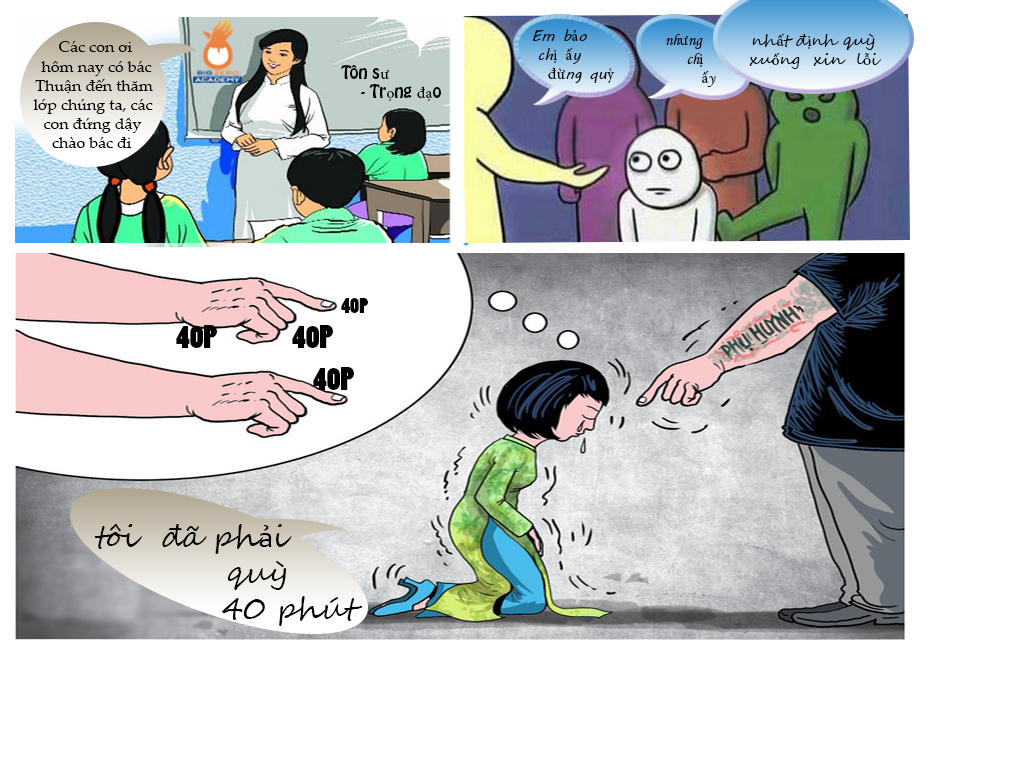
<style>
.page{position:relative;width:1024px;height:768px;background:#ffffff}
.page>*{position:absolute;margin:0}
.t1{font:16px "MVBoli";color:#000000}
.t2{font:16px "MinionPro-Regular";color:#000000}
.t3{font:16px "PalatinoLinotype-Roman";color:#000000}
.t4{font:16px "MonotypeCorsiva";color:#000000}
.t5{font:16px "SegoeScript";color:#000000}
.t6{font:16px "HoboStd";color:#000000}
.t7{font:20px "PoplarStd";color:#000000}
.t8{font:30px "PoplarStd";color:#000000}
.t9{font:30px "SegoeScript";color:#000000}
.t10{font:30px "Candara";color:#000000}
</style>
<div class="page">
<p class="t1" style="left:533px;top:29px;width:82px;height:54px;text-align:center">Em b<span class="t2">ả</span>o <br>ch<span class="t2">ị ấ</span>y <br> <span class="t2">đừ</span>ng qu<span class="t2">ỳ</span></p>
<p class="t3" style="left:33px;top:41px;width:120px;height:107px;text-align:center">Các con ơi hôm nay có bác Thuận đến thăm lớp chúng ta, các con đứng dậy chào bác đi nào...</p>
<p class="t4" style="left:666px;top:34px;width:50px;height:53px;text-align:center">nh<span class="t2">ư</span>ng <br>ch<span class="t2">ị<br> ấ</span>y</p>
<p class="t5" style="left:749px;top:33px;width:132px;height:36px;text-align:center">nh<span class="t2">ấ</span>t đ<span class="t2">ị</span>nh quỳ xu<span class="t2">ố</span>ng  xin  l<span class="t2">ỗ</span>i</p>
<p class="t6" style="left:341px;top:65px;width:100px;height:36px;text-align:center">Tôn s<span class="t2">ư</span><br>  - Tr<span class="t2">ọ</span>ng <span class="t2">đạ</span>o</p>
<p class="t7" style="left:341px;top:298px;width:27px;height:15px">40P</p>
<p class="t8" style="left:176px;top:325px;width:41px;height:23px">40P</p>
<p class="t8" style="left:292px;top:325px;width:41px;height:23px">40P</p>
<p class="t8" style="left:313px;top:367px;width:41px;height:23px">40P</p>
<p class="t9" style="left:94px;top:523px;width:269px;height:103px;text-align:center">tôi  đã ph<span class="t10">ả</span>i quỳ<br>40 phút</p>
</div>
